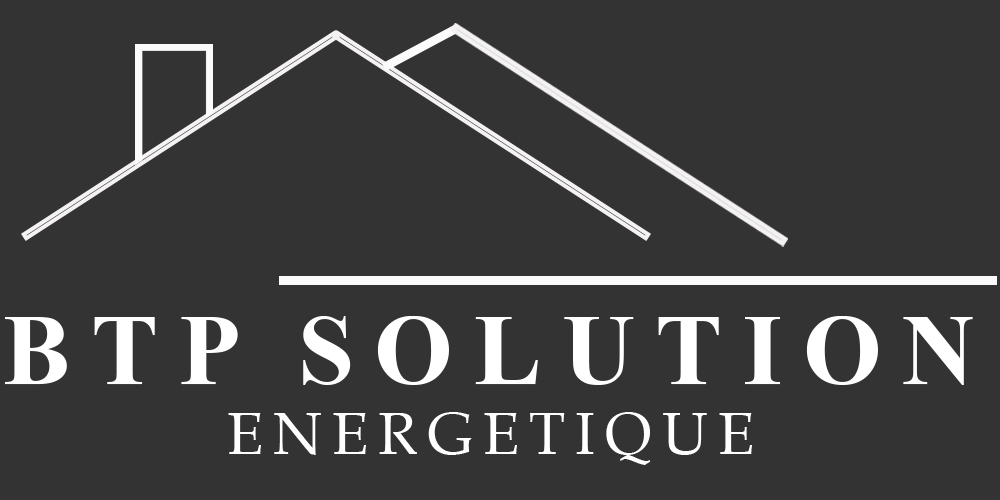
<style>
.page{position:relative;width:1000px;height:500px;background:#333333}
.page>*{position:absolute;margin:0}
.t1{font:101.5px "TimesNewRomanPS-BoldMT";letter-spacing:0.165em;color:#ffffff;text-transform:uppercase}
.t2{font:59.5px "BookAntiqua";letter-spacing:0.165em;color:#ffffff;text-transform:uppercase}
</style>
<div class="page">
<p class="t1" style="left:5px;top:316px;width:968px;height:69px">BTP Solution</p>
<p class="t2" style="left:228px;top:412px;width:524px;height:53px">energetique</p>
</div>
